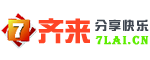
<style>
.page{position:relative;width:150px;height:60px;background:#ffffff}
.page>*{position:absolute;margin:0}
.t1{font:26px "SingyiEG-Ultra-GB";color:#ff4526;font-weight:bold}
.t2{font:12px "SingyiEG-Ultra-GB";letter-spacing:0.15em;color:#404751}
.t3{font:12px "Algerian";letter-spacing:0.1em;color:#5eed00;font-weight:bold}
</style>
<div class="page">
<p class="t1" style="left:38px;top:18px;width:52px;height:26px">齐来</p>
<p class="t2" style="left:95px;top:19px;width:54px;height:12px">分享快乐</p>
<p class="t3" style="left:95px;top:35px;width:54px;height:10px">7lai.cn</p>
</div>
